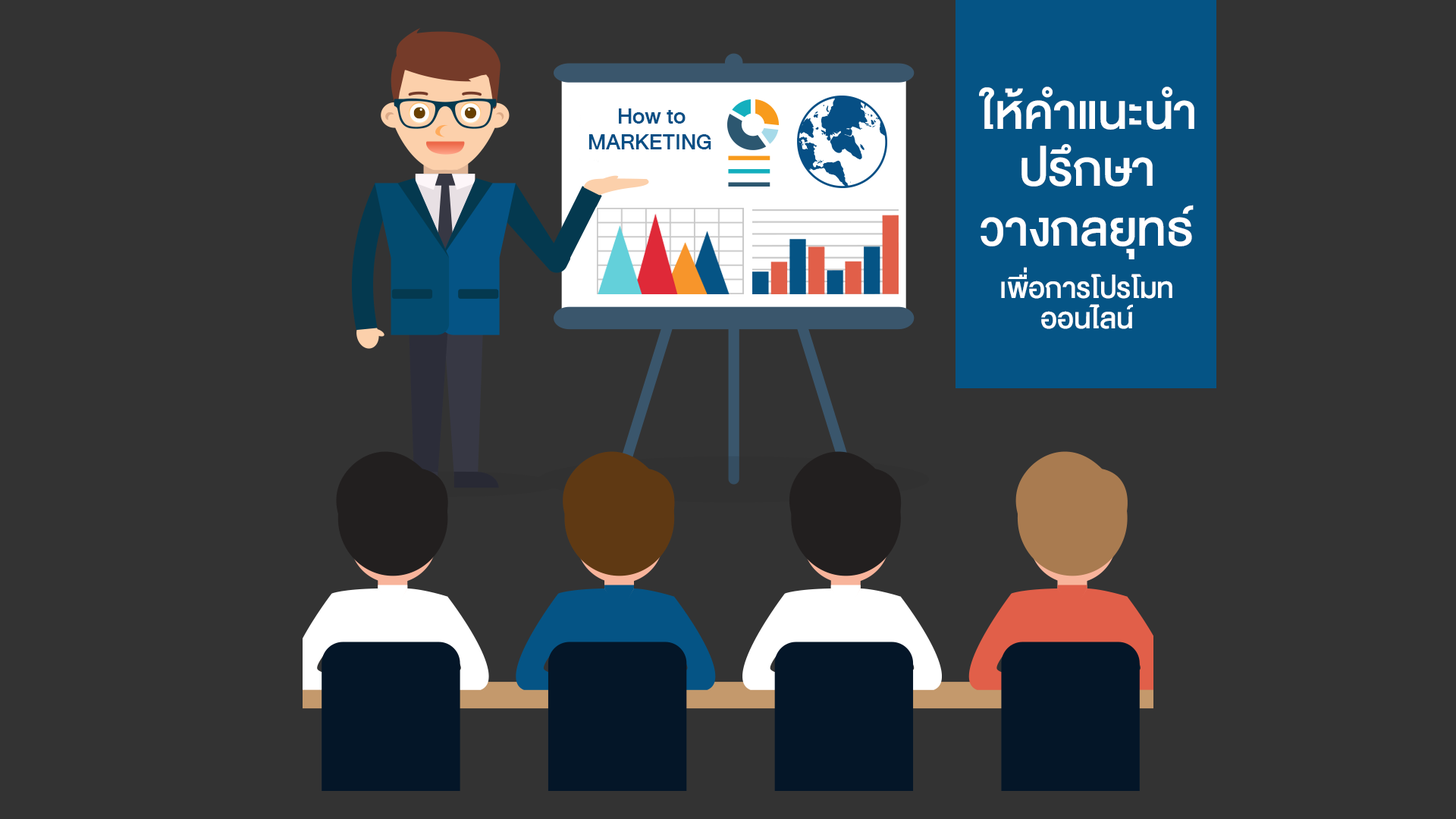
<style>
.page{position:relative;width:1456px;height:819px;background:#333333}
.page>*{position:absolute;margin:0}
.t1{font:67.8px "DBHeavent-Med";color:#ffffff}
.t2{font:30.9px "DBHeavent-Med";color:#064f85}
.t3{font:40px/30px "DBHeavent-Med";color:#ffffff}
</style>
<div class="page">
<p class="t1" style="left:979px;top:86px;width:215px;height:44px">ให้คำแนะนำ</p>
<p class="t2" style="left:619px;top:108px;width:67px;height:16px">How to</p>
<p class="t2" style="left:588px;top:134px;width:123px;height:15px">MARKETING</p>
<p class="t1" style="left:1021px;top:143px;width:132px;height:44px">ปรึกษา</p>
<p class="t1" style="left:981px;top:205px;width:213px;height:54px">วางกลยุทธ์</p>
<p class="t3" style="left:1001px;top:267px;width:171px;height:62px;text-align:center">เพื่อการโปรโมท<br>ออนไลน์</p>
</div>
